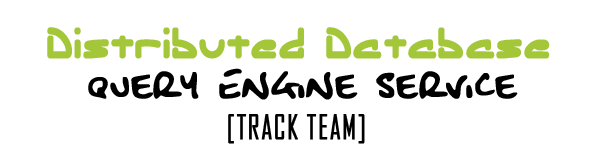
<style>
.page{position:relative;width:600px;height:154px;background:#ffffff}
.page>*{position:absolute;margin:0}
.t1{font:44px "EclipticBRK";letter-spacing:0.05em;color:#a4c639;font-weight:bold;scale:0.8 1}
.t2{font:40px "FatboySlimBLTCBRK";letter-spacing:0.05em;color:#000000;font-weight:bold;scale:0.8 1}
.t3{font:33.3px "AgencyFB-Reg";letter-spacing:0.05em;color:#000000;font-weight:bold;scale:0.8 1}
</style>
<div class="page">
<p class="t1" style="left:47px;top:27px;width:503px;height:32px">Distributed Database</p>
<p class="t2" style="left:88px;top:68px;width:430px;height:32px">Query Engine service</p>
<p class="t3" style="left:228px;top:114px;width:137px;height:30px">[TRACK TEAM]</p>
</div>
